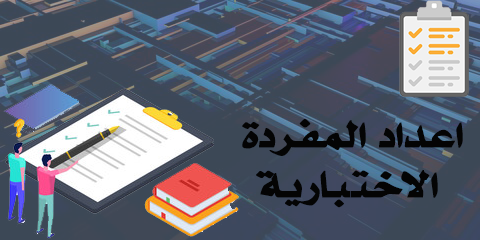
<style>
.page{position:relative;width:480px;height:240px}
.page>*{position:absolute;margin:0}
.t1{font:41.7px/50px "Almohanadlongkaf";color:#040404;font-weight:bold}
</style>
<div class="page">
<p class="t1" style="left:242px;top:119px;width:221px;height:89px;text-align:center">اعداد المفردة<br> الاختبارية</p>
</div>
